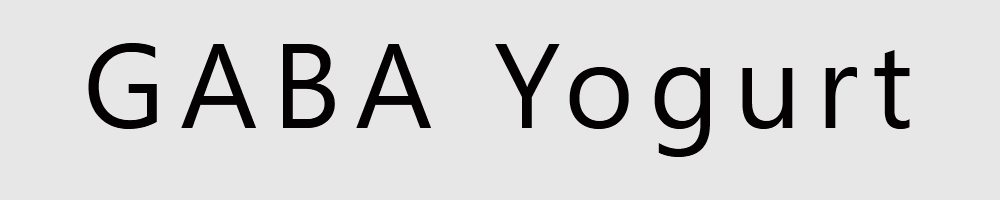
<style>
.page{position:relative;width:1000px;height:200px;background:#e7e7e7}
.page>*{position:absolute;margin:0}
.t1{font:120px "SegoeUI";letter-spacing:0.12em;color:#030101}
</style>
<div class="page">
<p class="t1" style="left:88px;top:43px;width:822px;height:114px">GABA Yogurt</p>
</div>
